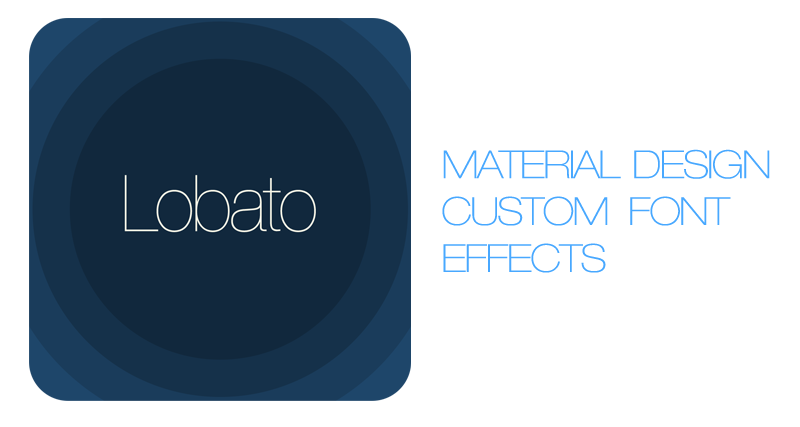
<style>
.page{position:relative;width:800px;height:427px;background:#ffffff}
.page>*{position:absolute;margin:0}
.t1{font:39px "Helvetica33-ExtendedThin";letter-spacing:-0.05em;color:#48a8ff}
</style>
<div class="page">
<p class="t1" style="left:442px;top:149px;width:328px;height:124px">MATERIAL  DESIGN<br>CUSTOM   FONT<br>EFFECTS</p>
</div>
